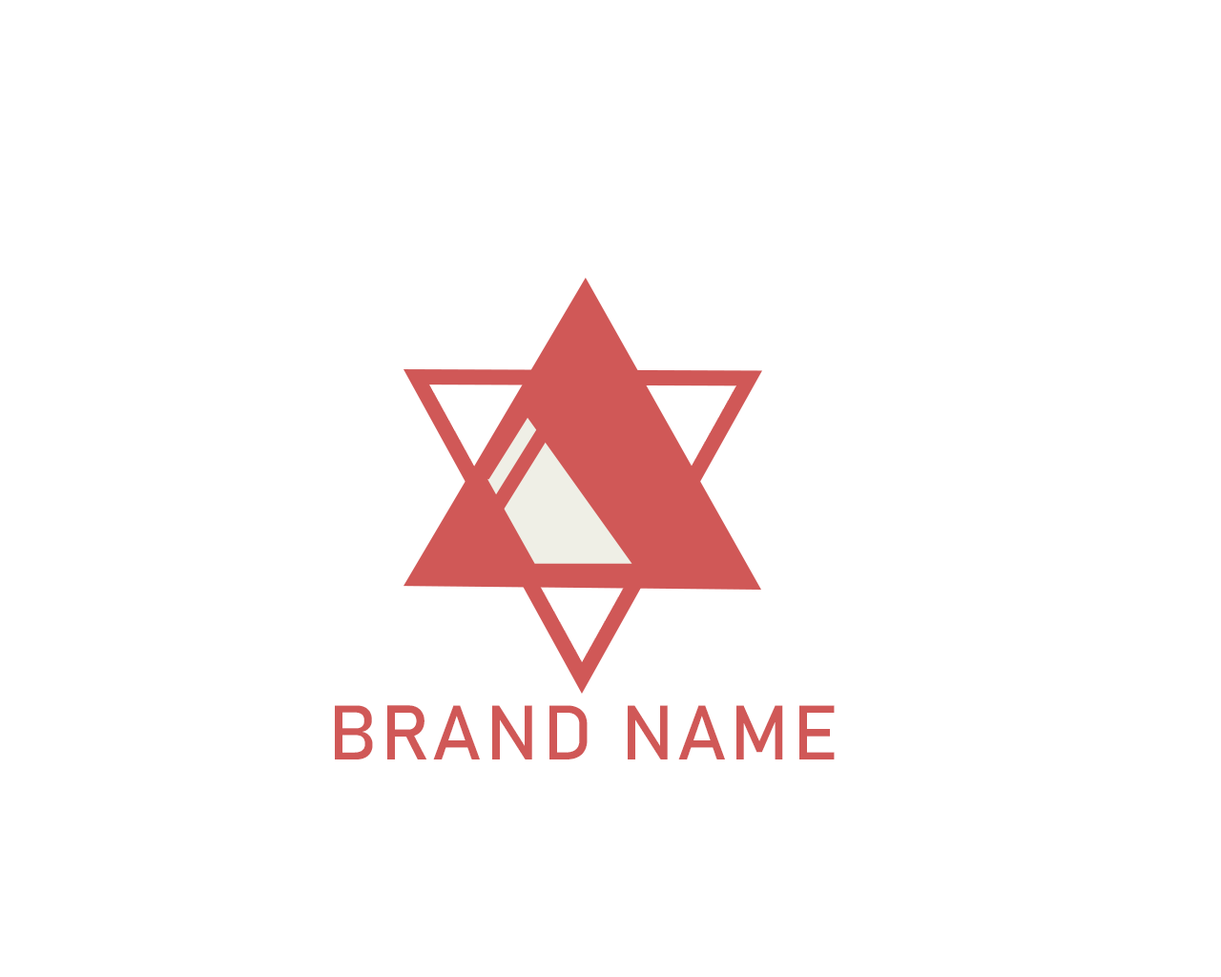
<style>
.page{position:relative;width:1221px;height:977px;background:#ffffff}
.page>*{position:absolute;margin:0}
.t1{font:76.1px "Bahnschrift";letter-spacing:0.05em;color:#d05857}
</style>
<div class="page">
<p class="t1" style="left:335px;top:705px;width:500px;height:54px">BRAND NAME</p>
</div>
